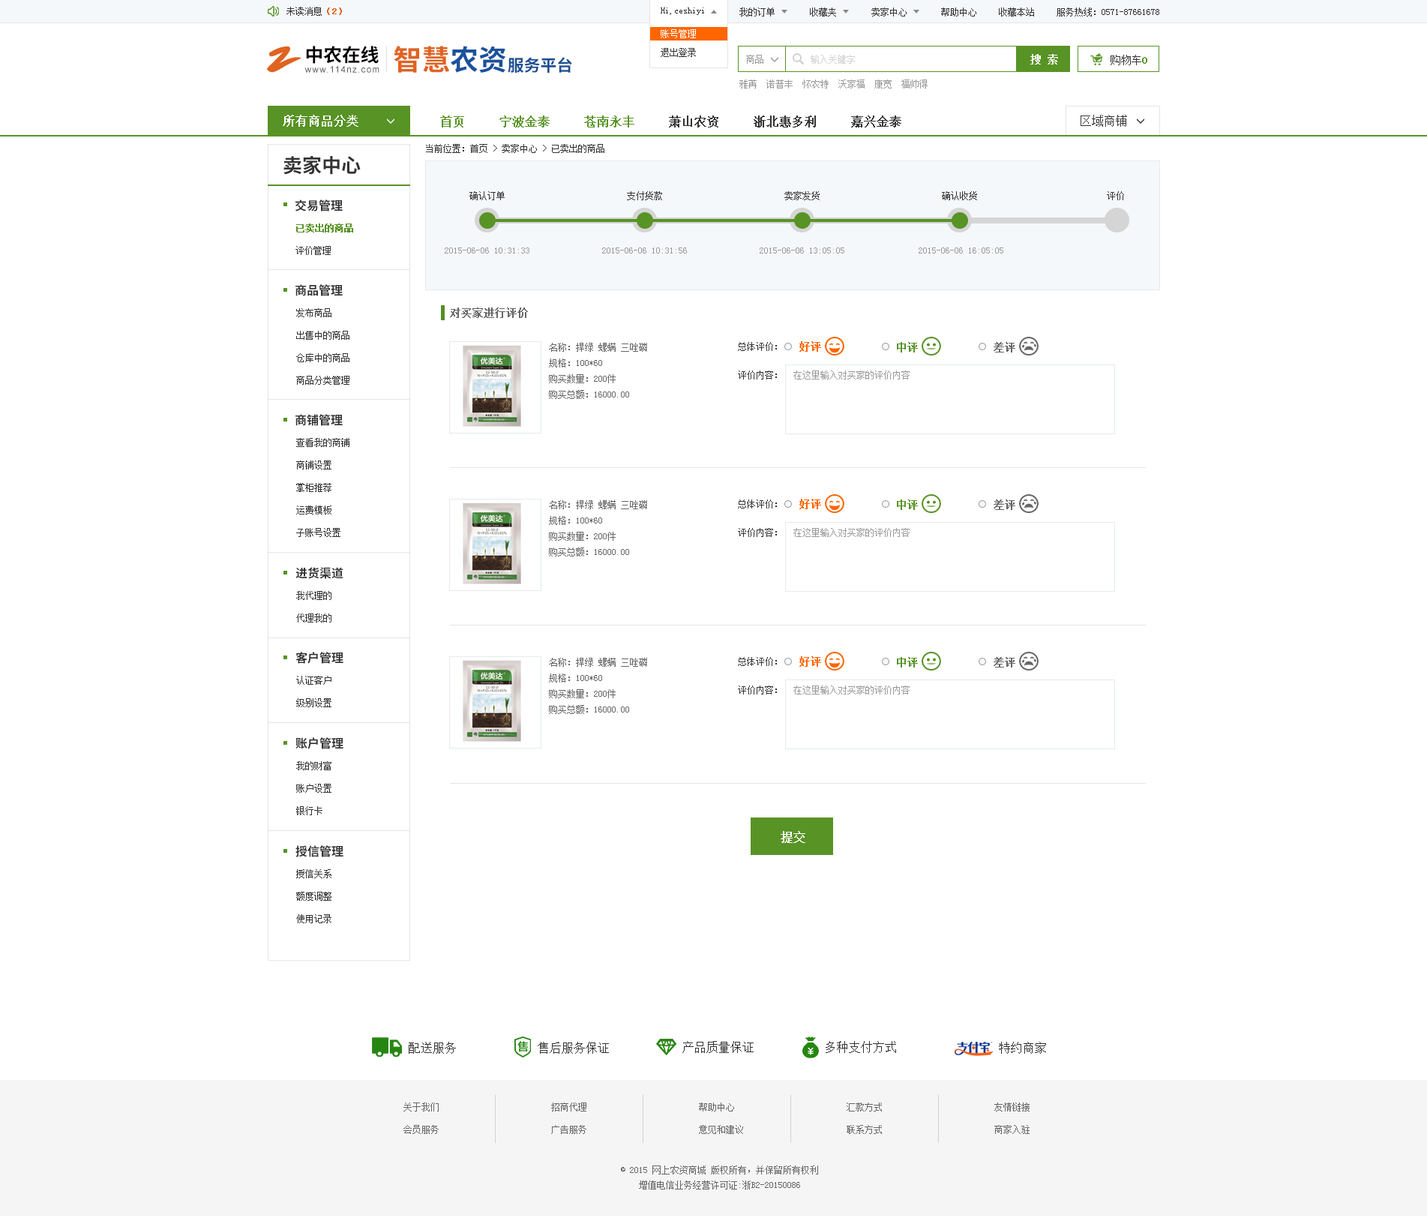
<style>
.page{position:relative;width:1427px;height:1224px;background:#ffffff}
.page>*{position:absolute;margin:0}
.t1{font:9px "SimSun";color:#333333}
.t2{font:9px "SimSun";color:#e0631f;font-weight:bold}
.t3{font:9px/18.8px "SimSun";color:#ffffff}
.t4{font:9px/18.8px "SimSun";color:#333333}
.t5{font:38px "SmudgerLetPlain";color:#e0631f}
.t6{font:18.6px "SourceHanSansCN-Bold";color:#060001}
.t7{font:28.4px "SourceHanSansCN-Bold";color:#e0631f}
.t8{font:28.4px "SourceHanSansCN-Bold";color:#1a529c}
.t9{font:10.5px "SimSun";color:#ffffff;font-weight:bold}
.t10{font:16.3px "SourceHanSansCN-Bold";color:#194f93}
.t11{font:9px "SimSun";color:#999999}
.t12{font:9px "SimSun";color:#d1d1d1}
.t13{font:10.5px "SimSun";color:#333333}
.t14{font:10.5px "SimSun";color:#589325;font-weight:bold}
.t15{font:8.9px "ArialMT";letter-spacing:0.1em;color:#585859}
.t16{font:12px "SimSun";color:#ffffff;font-weight:bold}
.t17{font:12px "SimSun";color:#333333;font-weight:bold}
.t18{font:12px "SimSun";color:#589325;font-weight:bold}
.t19{font:12px "SimSun";color:#333333}
.t20{font:19.5px "SourceHanSansCN-Bold";color:#333333}
.t21{font:12px "SourceHanSansCN-Bold";color:#333333}
.t22{font:9px/22.5px "SimSun";color:#589325;font-weight:bold}
.t23{font:9px/22.5px "SimSun";color:#333333}
.t24{font:10.5px "SimSun";color:#666666;font-weight:bold}
.t25{font:10.5px "SimSun";color:#ff6600;font-weight:bold}
.t26{font:9px "SimSun";color:#666666}
.t27{font:9px/22.5px "SimSun";color:#666666}
.t28{font:9px/15px "SimSun";color:#666666}
</style>
<div class="page">
<p class="t1" style="left:286px;top:7px;width:56px;height:9px">未读消息<span class="t2">（2）</span></p>
<p class="t1" style="left:661px;top:8px;width:43px;height:7px">Hi,ceshiyi</p>
<p class="t1" style="left:661px;top:8px;width:43px;height:7px">Hi,ceshiyi</p>
<p class="t1" style="left:740px;top:8px;width:35px;height:8px">我的订单</p>
<p class="t1" style="left:810px;top:8px;width:26px;height:8px">收藏夹</p>
<p class="t1" style="left:872px;top:8px;width:35px;height:8px">卖家中心</p>
<p class="t1" style="left:941px;top:8px;width:35px;height:8px">帮助中心</p>
<p class="t1" style="left:999px;top:8px;width:35px;height:8px">收藏本站</p>
<p class="t1" style="left:1057px;top:8px;width:103px;height:8px">服务热线：0571-87661678</p>
<p class="t3" style="left:661px;top:29px;width:35px;height:28px">账号管理<br><span class="t4">退出登录</span></p>
<p class="t5" style="left:267px;top:46px;width:35px;height:27px">Z</p>
<p class="t6" style="left:306px;top:46px;width:73px;height:18px">中农在线</p>
<p class="t7" style="left:394px;top:46px;width:112px;height:27px">智慧<span class="t8">农资</span></p>
<p class="t9" style="left:1030px;top:54px;width:28px;height:10px">搜 索</p>
<p class="t10" style="left:508px;top:57px;width:64px;height:16px">服务平台</p>
<p class="t11" style="left:746px;top:55px;width:18px;height:9px">商品</p>
<p class="t12" style="left:811px;top:55px;width:44px;height:9px">输入关键字</p>
<p class="t13" style="left:1111px;top:55px;width:37px;height:10px">购物车<span class="t14">0</span></p>
<p class="t15" style="left:304px;top:66px;width:76px;height:7px">www.114nz.com</p>
<p class="t11" style="left:740px;top:80px;width:188px;height:8px">雅苒  诺普丰  怀农特  沃家福  康宽  福帅得</p>
<p class="t16" style="left:283px;top:115px;width:75px;height:12px">所有商品分类</p>
<p class="t17" style="left:440px;top:116px;width:462px;height:12px"><span class="t18">首页     宁波金泰     苍南永丰    </span> 萧山农资     浙北惠多利     嘉兴金泰</p>
<p class="t19" style="left:1081px;top:115px;width:46px;height:12px">区域商铺</p>
<p class="t1" style="left:426px;top:144px;width:178px;height:9px">当前位置：首页 &gt; 卖家中心 &gt; 已卖出的商品</p>
<p class="t20" style="left:284px;top:155px;width:77px;height:20px">卖家中心</p>
<p class="t1" style="left:470px;top:191px;width:35px;height:9px">确认订单</p>
<p class="t1" style="left:627px;top:191px;width:35px;height:9px">支付货款</p>
<p class="t1" style="left:784px;top:191px;width:36px;height:9px">卖家发货</p>
<p class="t1" style="left:942px;top:191px;width:35px;height:9px">确认收货</p>
<p class="t1" style="left:1107px;top:191px;width:17px;height:9px">评价</p>
<p class="t21" style="left:295px;top:200px;width:48px;height:12px">交易管理</p>
<p class="t22" style="left:296px;top:224px;width:57px;height:31px">已卖出的商品<br><span class="t23">评价管理</span></p>
<p class="t11" style="left:445px;top:248px;width:85px;height:6px">2015-06-06 10:31:33</p>
<p class="t11" style="left:602px;top:248px;width:85px;height:6px">2015-06-06 10:31:56</p>
<p class="t11" style="left:760px;top:248px;width:84px;height:6px">2015-06-06 13:05:05</p>
<p class="t11" style="left:919px;top:248px;width:85px;height:6px">2015-06-06 16:05:05</p>
<p class="t21" style="left:296px;top:284px;width:47px;height:12px">商品管理</p>
<p class="t23" style="left:296px;top:308px;width:54px;height:77px">发布商品<br>出售中的商品<br>仓库中的商品<br>商品分类管理</p>
<p class="t24" style="left:450px;top:308px;width:78px;height:10px">对买家进行评价</p>
<p class="t1" style="left:738px;top:342px;width:39px;height:9px">总体评价：</p>
<p class="t25" style="left:800px;top:341px;width:21px;height:11px">好评</p>
<p class="t14" style="left:897px;top:342px;width:21px;height:10px">中评</p>
<p class="t24" style="left:994px;top:342px;width:22px;height:10px">差评</p>
<p class="t26" style="left:549px;top:343px;width:98px;height:56px">名称：捍绿 螺螨 三唑磷<br>规格：100*60<br>购买数量：200件<br>购买总额：16000.00</p>
<p class="t1" style="left:738px;top:370px;width:39px;height:10px">评价内容：</p>
<p class="t11" style="left:794px;top:370px;width:116px;height:10px">在这里输入对买家的评价内容</p>
<p class="t21" style="left:296px;top:414px;width:47px;height:12px">商铺管理</p>
<p class="t23" style="left:296px;top:438px;width:54px;height:99px">查看我的商铺<br>商铺设置<br>掌柜推荐<br>运费模板<br>子账号设置</p>
<p class="t26" style="left:549px;top:500px;width:98px;height:56px">名称：捍绿 螺螨 三唑磷<br>规格：100*60<br>购买数量：200件<br>购买总额：16000.00</p>
<p class="t1" style="left:738px;top:500px;width:39px;height:8px">总体评价：</p>
<p class="t25" style="left:800px;top:499px;width:21px;height:10px">好评</p>
<p class="t14" style="left:897px;top:500px;width:21px;height:10px">中评</p>
<p class="t24" style="left:994px;top:500px;width:22px;height:10px">差评</p>
<p class="t1" style="left:738px;top:528px;width:39px;height:9px">评价内容：</p>
<p class="t11" style="left:794px;top:528px;width:116px;height:9px">在这里输入对买家的评价内容</p>
<p class="t21" style="left:296px;top:567px;width:48px;height:12px">进货渠道</p>
<p class="t23" style="left:296px;top:591px;width:36px;height:31px">我代理的<br>代理我的</p>
<p class="t21" style="left:296px;top:652px;width:48px;height:12px">客户管理</p>
<p class="t26" style="left:549px;top:658px;width:98px;height:56px">名称：捍绿 螺螨 三唑磷<br>规格：100*60<br>购买数量：200件<br>购买总额：16000.00</p>
<p class="t1" style="left:738px;top:657px;width:39px;height:9px">总体评价：</p>
<p class="t25" style="left:800px;top:656px;width:21px;height:11px">好评</p>
<p class="t14" style="left:897px;top:657px;width:21px;height:11px">中评</p>
<p class="t24" style="left:994px;top:657px;width:22px;height:11px">差评</p>
<p class="t23" style="left:296px;top:676px;width:36px;height:31px">认证客户<br>级别设置</p>
<p class="t1" style="left:738px;top:686px;width:39px;height:8px">评价内容：</p>
<p class="t11" style="left:794px;top:686px;width:116px;height:8px">在这里输入对买家的评价内容</p>
<p class="t21" style="left:296px;top:737px;width:48px;height:12px">账户管理</p>
<p class="t23" style="left:296px;top:761px;width:36px;height:54px">我的财富<br>账户设置<br>银行卡</p>
<p class="t16" style="left:781px;top:831px;width:25px;height:12px">提交</p>
<p class="t21" style="left:296px;top:845px;width:48px;height:12px">授信管理</p>
<p class="t23" style="left:296px;top:869px;width:36px;height:54px">授信关系<br>额度调整<br>使用记录</p>
<p class="t19" style="left:409px;top:1042px;width:47px;height:12px">配送服务</p>
<p class="t19" style="left:538px;top:1042px;width:71px;height:12px">售后服务保证</p>
<p class="t19" style="left:682px;top:1041px;width:72px;height:12px">产品质量保证</p>
<p class="t19" style="left:826px;top:1041px;width:70px;height:12px">多种支付方式</p>
<p class="t19" style="left:999px;top:1042px;width:47px;height:12px">特约商家</p>
<p class="t27" style="left:404px;top:1102px;width:35px;height:32px">关于我们<br>会员服务</p>
<p class="t27" style="left:551px;top:1102px;width:35px;height:32px">招商代理<br>广告服务</p>
<p class="t27" style="left:699px;top:1102px;width:44px;height:32px">帮助中心<br>意见和建议</p>
<p class="t27" style="left:847px;top:1102px;width:35px;height:32px">汇款方式<br>联系方式</p>
<p class="t27" style="left:994px;top:1102px;width:36px;height:32px">友情链接<br>商家入驻</p>
<p class="t28" style="left:621px;top:1166px;width:197px;height:24px;text-align:center">© 2015 网上农资商城 版权所有，并保留所有权利<br>增值电信业务经营许可证:浙B2-20150086</p>
</div>
